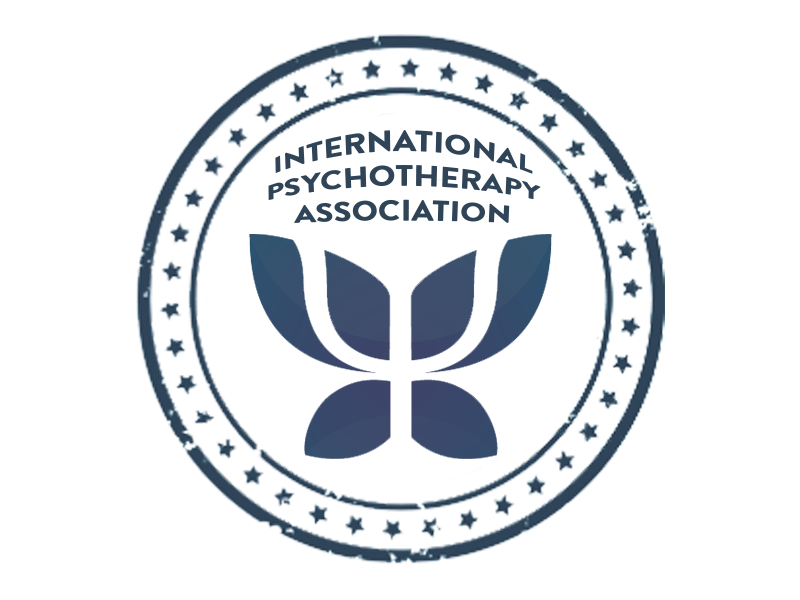
<style>
.page{position:relative;width:800px;height:600px;background:#ffffff}
.page>*{position:absolute;margin:0}
.t1{font:19.7px "BrandonGrotesque-Black";color:#304458;text-transform:uppercase;scale:1.67 1}
</style>
<div class="page">
<p class="t1" style="left:268px;top:130px;width:273px;height:93px;text-align:center">International<br>Psychotherapy<br>Association</p>
</div>
